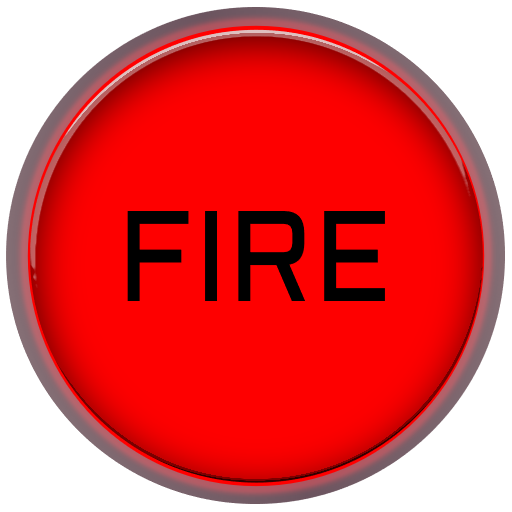
<style>
.page{position:relative;width:512px;height:512px;background:#fe0000}
.page>*{position:absolute;margin:0}
.t1{font:128.6px "Aldrich-Regular";color:#000000;scale:0.93 1}
</style>
<div class="page">
<p class="t1" style="left:127px;top:211px;width:258px;height:90px">FIRE</p>
</div>
